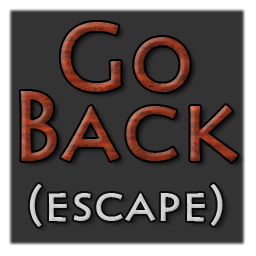
<style>
.page{position:relative;width:256px;height:256px;background:#333333}
.page>*{position:absolute;margin:0}
.t1{font:90px "Pericles"}
.t2{font:47px "Pericles";color:#d2d2d2}
</style>
<div class="page">
<p class="t1" style="left:60px;top:22px;width:130px;height:70px">Go</p>
<p class="t1" style="left:20px;top:91px;width:218px;height:72px">Back</p>
<p class="t2" style="left:29px;top:184px;width:194px;height:43px">(escape)</p>
</div>
